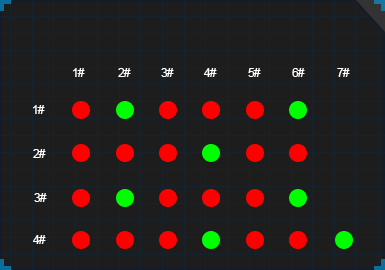
<style>
.page{position:relative;width:385px;height:270px;background:#1d1d1d}
.page>*{position:absolute;margin:0}
.t1{font:12px "ArialMT";letter-spacing:-0.07em;color:#ffffff;text-transform:uppercase}
</style>
<div class="page">
<p class="t1" style="left:73px;top:68px;width:12px;height:9px">1#</p>
<p class="t1" style="left:118px;top:68px;width:13px;height:9px">2#</p>
<p class="t1" style="left:161px;top:68px;width:13px;height:9px">3#</p>
<p class="t1" style="left:204px;top:68px;width:13px;height:9px">4#</p>
<p class="t1" style="left:248px;top:68px;width:13px;height:9px">5#</p>
<p class="t1" style="left:292px;top:68px;width:13px;height:9px">6#</p>
<p class="t1" style="left:337px;top:68px;width:13px;height:9px">7#</p>
<p class="t1" style="left:33px;top:105px;width:12px;height:9px">1#</p>
<p class="t1" style="left:33px;top:149px;width:13px;height:9px">2#</p>
<p class="t1" style="left:34px;top:193px;width:13px;height:9px">3#</p>
<p class="t1" style="left:33px;top:235px;width:13px;height:9px">4#</p>
</div>
